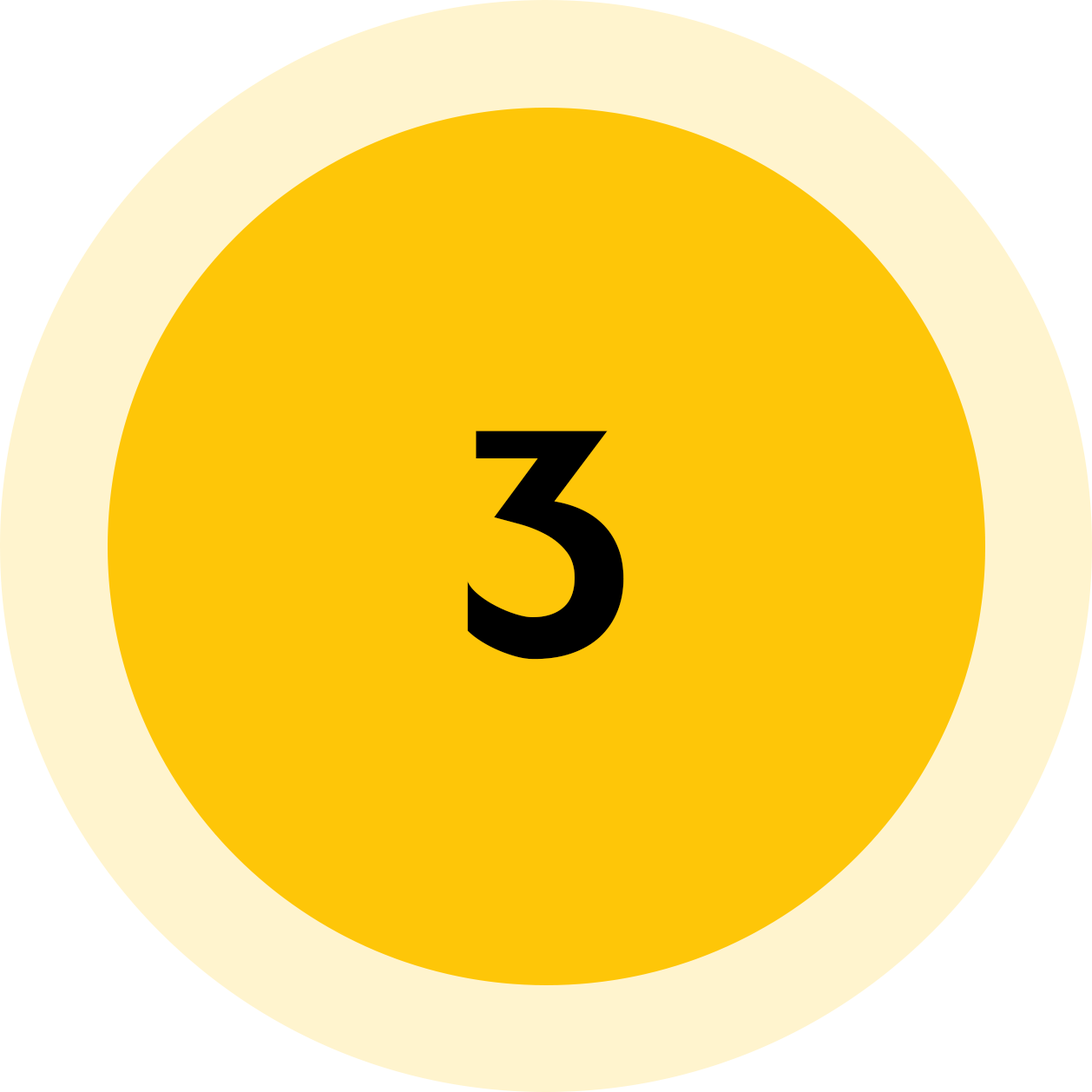
<style>
.page{position:relative;width:1092px;height:1092px;background:#fec608}
.page>*{position:absolute;margin:0}
.t1{font:307.4px "BMHANNA11yrsold";color:#000000}
</style>
<div class="page">
<p class="t1" style="left:467px;top:431px;width:157px;height:229px">3</p>
</div>
